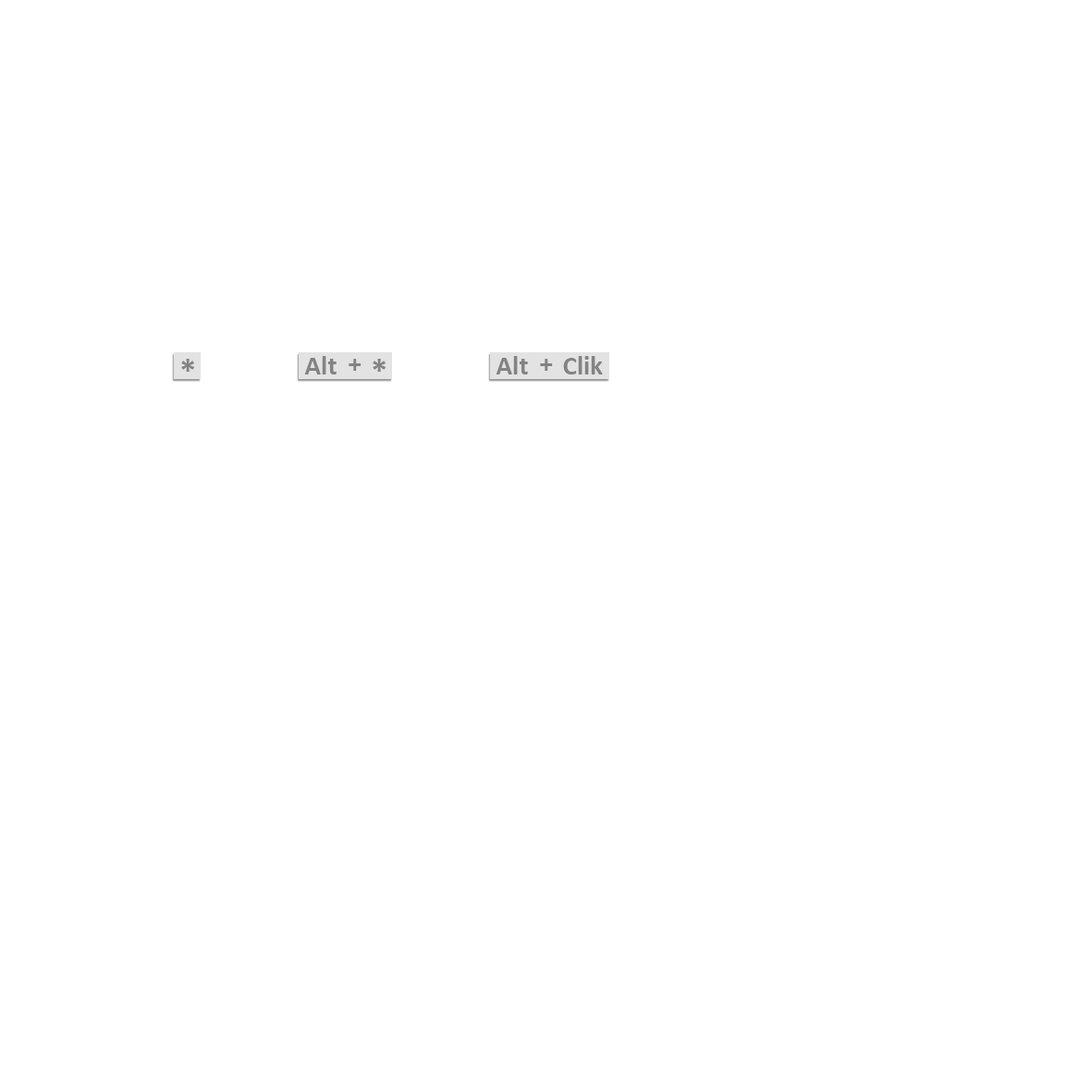
<style>
.page{position:relative;width:1092px;height:1092px;background:#ffffff}
.page>*{position:absolute;margin:0}
.t1{font:33.9px "Calibri-Bold";color:#838383}
.t2{font:27px "Calibri-Bold";color:#838383}
</style>
<div class="page">
<p class="t1" style="left:181px;top:359px;width:13px;height:13px">*</p>
<p class="t2" style="left:304px;top:356px;width:33px;height:18px">Alt</p>
<p class="t2" style="left:349px;top:359px;width:13px;height:12px">+</p>
<p class="t1" style="left:373px;top:359px;width:13px;height:13px">*</p>
<p class="t2" style="left:496px;top:356px;width:32px;height:18px">Alt</p>
<p class="t2" style="left:540px;top:359px;width:13px;height:12px">+</p>
<p class="t2" style="left:563px;top:356px;width:40px;height:18px">Clik</p>
</div>
